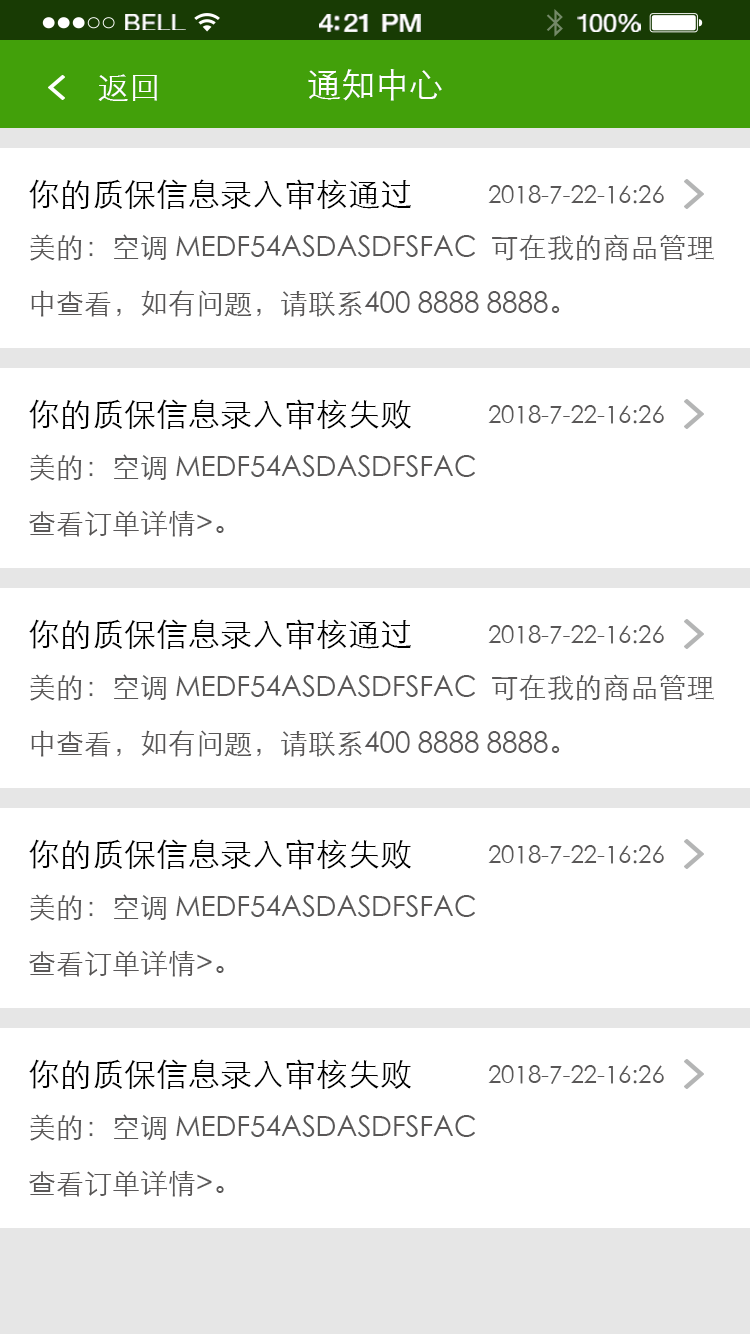
<style>
.page{position:relative;width:750px;height:1334px;background:#ffffff}
.page>*{position:absolute;margin:0}
.t1{font:23.3px "HelveticaNeue";letter-spacing:0.02em;color:#ffffff;scale:1.06 1}
.t2{font:25.3px "HelveticaNeue-Medium";letter-spacing:-0.02em;color:#ffffff;scale:1.06 1}
.t3{font:24.3px "HelveticaNeue";letter-spacing:-0.02em;color:#ffffff;scale:1.06 1}
.t4{font:32px "STXihei";color:#ffffff}
.t5{font:34px "STXihei";color:#ffffff}
.t6{font:28px/56px "STXihei";color:#595757}
.t7{font:32px/56px "STXihei";color:#000000}
.t8{font:24px "STXihei";color:#595757}
</style>
<div class="page">
<p class="t1" style="left:125px;top:14px;width:61px;height:16px">BELL</p>
<p class="t2" style="left:319px;top:14px;width:102px;height:18px">4:21 PM</p>
<p class="t3" style="left:577px;top:14px;width:64px;height:18px">100%</p>
<p class="t4" style="left:98px;top:74px;width:59px;height:27px">返回</p>
<p class="t5" style="left:308px;top:69px;width:134px;height:32px">通知中心</p>
<p class="t6" style="left:29px;top:179px;width:685px;height:138px"><span class="t7">你的质保信息录入审核通过<br></span>美的：空调 MEDF54ASDASDFSFAC  可在我的商品管理<br>中查看，如有问题，请联系400 8888 8888。</p>
<p class="t8" style="left:488px;top:185px;width:176px;height:19px">2018-7-22-16:26</p>
<p class="t6" style="left:29px;top:399px;width:447px;height:138px"><span class="t7">你的质保信息录入审核失败<br></span>美的：空调 MEDF54ASDASDFSFAC  <br>查看订单详情&gt;。</p>
<p class="t8" style="left:488px;top:405px;width:176px;height:19px">2018-7-22-16:26</p>
<p class="t6" style="left:29px;top:619px;width:685px;height:138px"><span class="t7">你的质保信息录入审核通过<br></span>美的：空调 MEDF54ASDASDFSFAC  可在我的商品管理<br>中查看，如有问题，请联系400 8888 8888。</p>
<p class="t8" style="left:488px;top:625px;width:176px;height:19px">2018-7-22-16:26</p>
<p class="t6" style="left:29px;top:839px;width:447px;height:138px"><span class="t7">你的质保信息录入审核失败<br></span>美的：空调 MEDF54ASDASDFSFAC  <br>查看订单详情&gt;。</p>
<p class="t8" style="left:488px;top:845px;width:176px;height:19px">2018-7-22-16:26</p>
<p class="t6" style="left:29px;top:1059px;width:447px;height:138px"><span class="t7">你的质保信息录入审核失败<br></span>美的：空调 MEDF54ASDASDFSFAC  <br>查看订单详情&gt;。</p>
<p class="t8" style="left:488px;top:1065px;width:176px;height:19px">2018-7-22-16:26</p>
</div>
